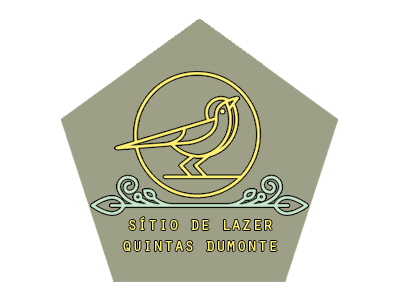
<style>
.page{position:relative;width:400px;height:300px;background:#ffffff}
.page>*{position:absolute;margin:0}
.t1{font:17.6px "OratorStd";color:#fff176}
</style>
<div class="page">
<p class="t1" style="left:123px;top:217px;width:154px;height:35px;text-align:justify">sítio de lazer<br>quintas dumonte</p>
</div>
